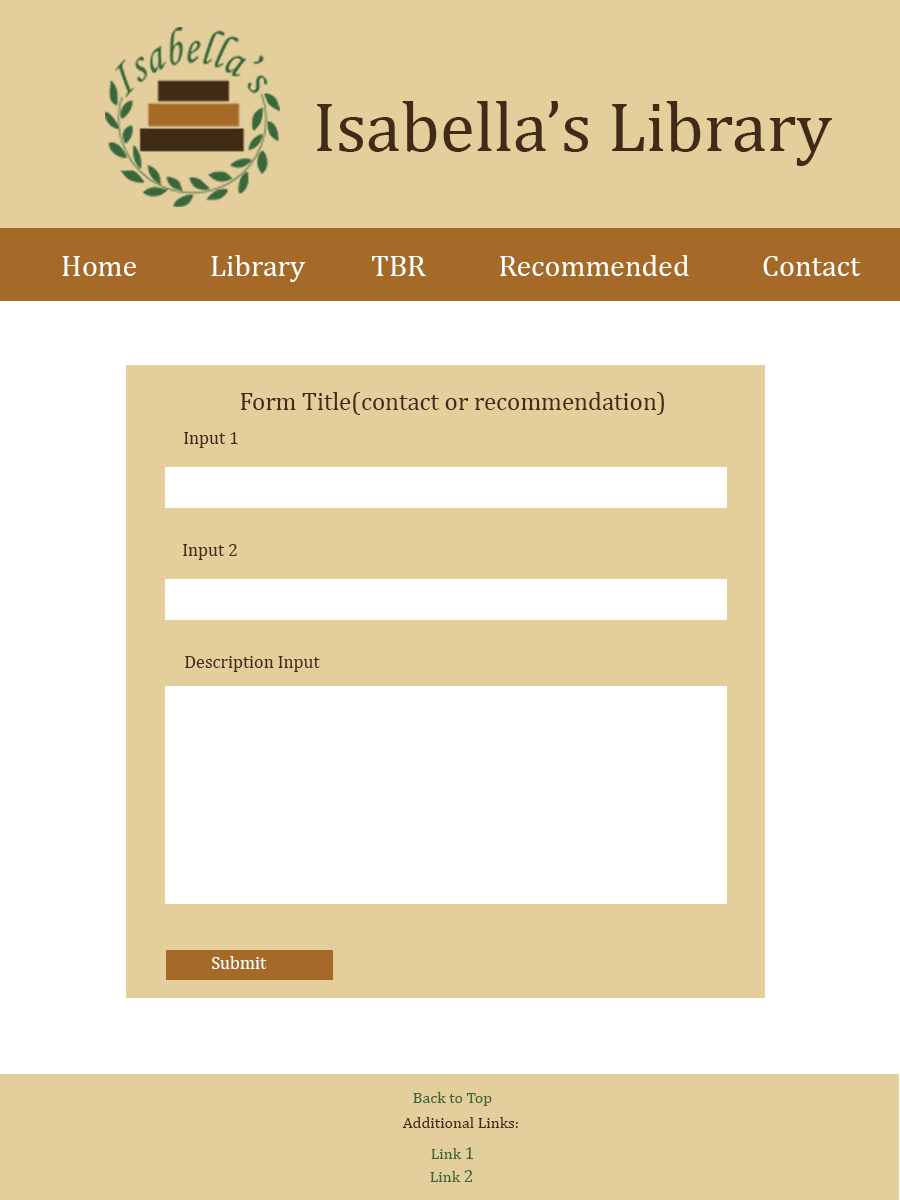
<style>
.page{position:relative;width:900px;height:1200px;background:#e3ce9c}
.page>*{position:absolute;margin:0}
.t1{font:71px "Cambria";color:#402b16}
.t2{font:30px "Cambria";color:#ffffff}
.t3{font:25px "Cambria";color:#402b16}
.t4{font:18px "Cambria";color:#402b16}
.t5{font:18px "Cambria";color:#ffffff}
.t6{font:16px "Cambria";color:#3a673b}
.t7{font:16px "Cambria";color:#402b16}
.t8{font:18px "Cambria";color:#3a673b}
</style>
<div class="page">
<p class="t1" style="left:317px;top:101px;width:515px;height:65px">Isabella’s Library</p>
<p class="t2" style="left:62px;top:255px;width:799px;height:27px">Home           Library          TBR           Recommended           Contact</p>
<p class="t3" style="left:240px;top:392px;width:424px;height:23px">Form Title(contact or recommendation)</p>
<p class="t4" style="left:184px;top:432px;width:54px;height:16px">Input 1</p>
<p class="t4" style="left:183px;top:544px;width:54px;height:16px">Input 2</p>
<p class="t4" style="left:185px;top:656px;width:135px;height:16px">Description Input</p>
<p class="t5" style="left:212px;top:956px;width:55px;height:13px">Submit</p>
<p class="t6" style="left:413px;top:1092px;width:79px;height:14px">Back to Top</p>
<p class="t7" style="left:402px;top:1117px;width:116px;height:11px">Additional Links:</p>
<p class="t6" style="left:431px;top:1147px;width:43px;height:12px">Link <span class="t8">1</span></p>
<p class="t6" style="left:430px;top:1170px;width:43px;height:12px">Link <span class="t8">2</span></p>
</div>
